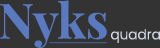
<style>
.page{position:relative;width:160px;height:48px;background:#333333}
.page>*{position:absolute;margin:0}
.t1{font:48.7px "PlayfairDisplay-Bold";color:#5979c1}
.t2{font:13.9px "Poppins-Light";color:#d3d9e5}
</style>
<div class="page">
<p class="t1" style="left:0px;top:0px;width:107px;height:48px">Nyks</p>
<p class="t2" style="left:111px;top:29px;width:49px;height:14px">quadra</p>
</div>
